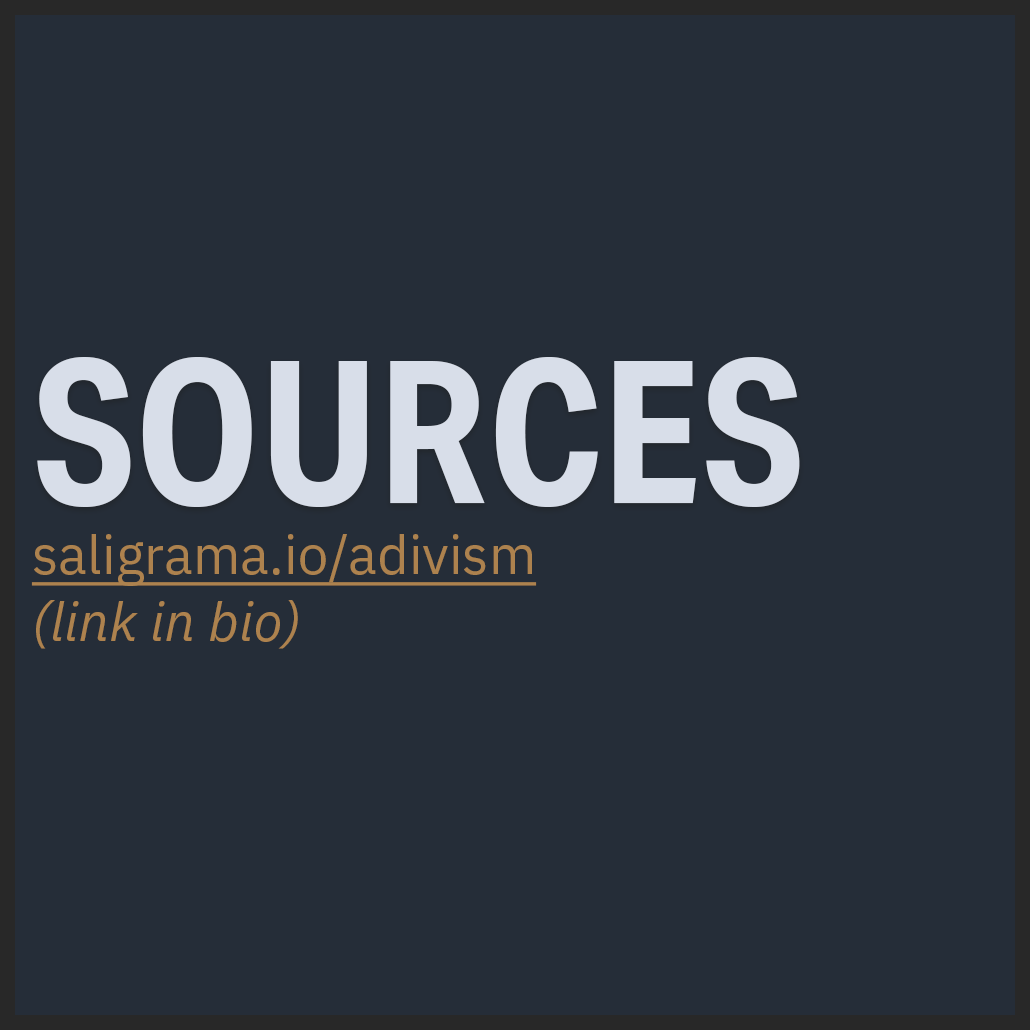
<style>
.page{position:relative;width:1030px;height:1030px;background:#252d38}
.page>*{position:absolute;margin:0}
.t1{font:198.6px "AktivGroteskCd-Bold";color:#d8dee9}
.t2{font:54.2px "IBMPlexSans";color:#ad824e;text-decoration:underline}
.t3{font:54.2px "IBMPlexSans-Italic";color:#ad824e}
</style>
<div class="page">
<p class="t1" style="left:37px;top:357px;width:763px;height:150px">SOURCES</p>
<p class="t2" style="left:31px;top:534px;width:506px;height:52px">saligrama.io/adivism</p>
<p class="t3" style="left:36px;top:600px;width:262px;height:49px">(link in bio)</p>
</div>
